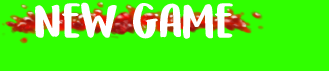
<style>
.page{position:relative;width:329px;height:71px;background:#30ff00}
.page>*{position:absolute;margin:0}
.t1{font:50px "DKHoneyguideCaps-Regular";color:#ffffff}
</style>
<div class="page">
<p class="t1" style="left:35px;top:2px;width:198px;height:37px">new game</p>
</div>
